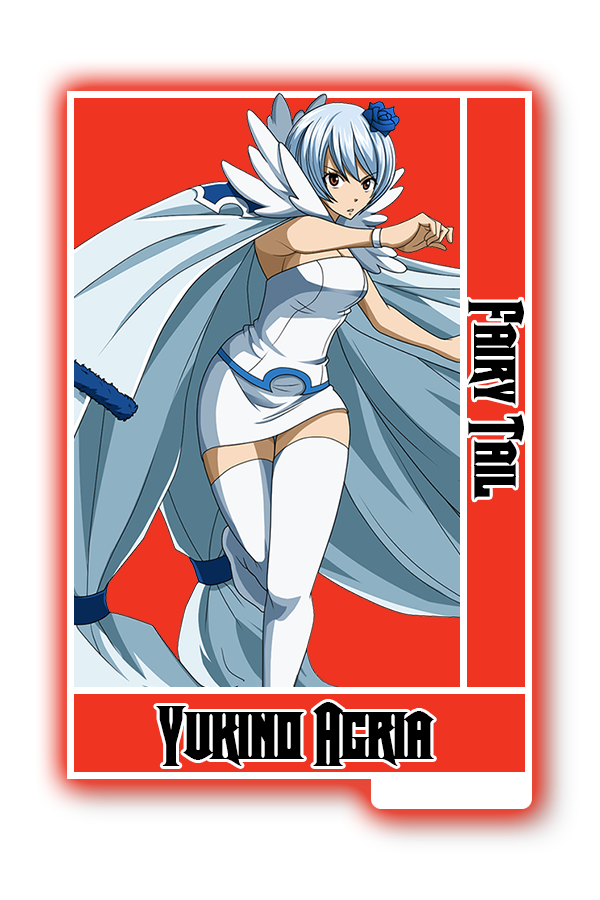
<style>
.page{position:relative;width:600px;height:900px;background:#ffffff}
.page>*{position:absolute;margin:0}
.t1{font:61.5px "Crown-Title";color:#000000}
.t2{font:70.1px "Crown-Title";color:#000000}
</style>
<div class="page">
<p class="t1" style="left:468px;top:299px;width:56px;height:201px;rotate:90deg">Fairy Tail</p>
<p class="t2" style="left:156px;top:702px;width:278px;height:64px">Yukino Agria</p>
</div>
